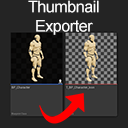
<style>
.page{position:relative;width:128px;height:128px;background:#242424}
.page>*{position:absolute;margin:0}
.t1{font:16px "ArialMT";letter-spacing:-0.025em;color:#ffffff}
</style>
<div class="page">
<p class="t1" style="left:28px;top:0px;width:71px;height:35px;text-align:center">Thumbnail<br>Exporter</p>
</div>
